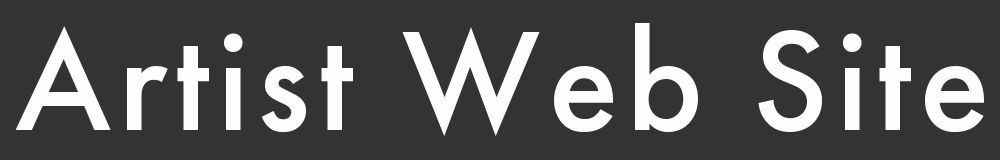
<style>
.page{position:relative;width:1000px;height:160px;background:#333333}
.page>*{position:absolute;margin:0}
.t1{font:146.9px "FuturaPT-Medium";letter-spacing:0.05em;color:#fefefe}
</style>
<div class="page">
<p class="t1" style="left:15px;top:23px;width:969px;height:113px">Artist Web Site</p>
</div>
